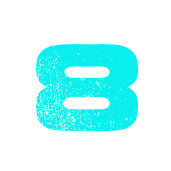
<style>
.page{position:relative;width:171px;height:171px;background:#ffffff}
.page>*{position:absolute;margin:0}
.t1{font:121px "Coalition";color:#0aeeee}
</style>
<div class="page">
<p class="t1" style="left:36px;top:44px;width:103px;height:88px">8</p>
</div>
